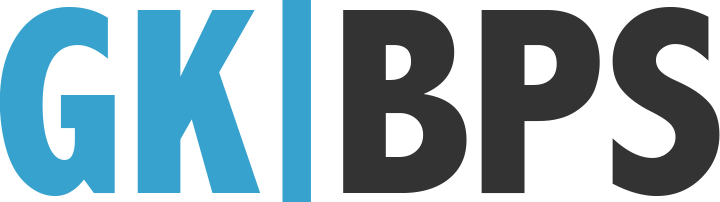
<style>
.page{position:relative;width:720px;height:202px;background:#ffffff}
.page>*{position:absolute;margin:0}
.t1{font:268px "AbadiMT-CondensedExtraBold";color:#36a2cd}
.t2{font:268px "AbadiMT-CondensedExtraBold";color:#333333}
</style>
<div class="page">
<p class="t1" style="left:0px;top:7px;width:261px;height:189px">GK</p>
<p class="t2" style="left:343px;top:7px;width:377px;height:189px">BPS</p>
</div>
